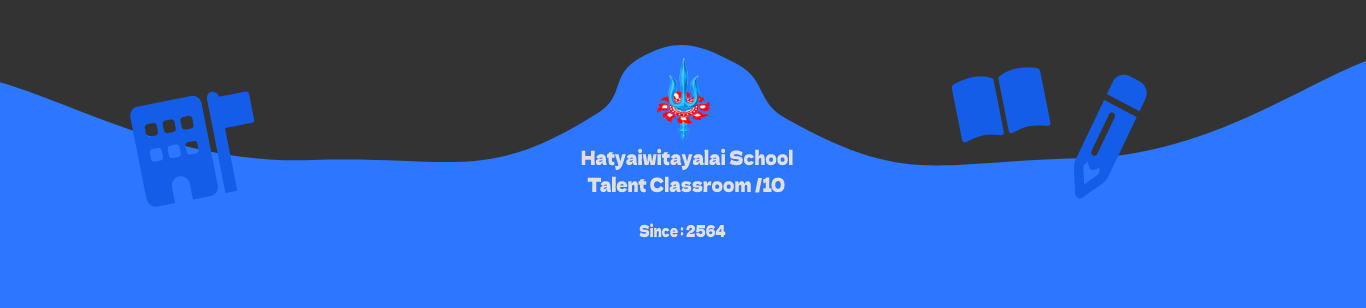
<style>
.page{position:relative;width:1366px;height:308px;background:#2d76ff}
.page>*{position:absolute;margin:0}
.t1{font:19.6px "DelaGothicOne-Regular";color:#e0e0e0;scale:0.8 1}
.t2{font:16.4px "DelaGothicOne-Regular";color:#e0e0e0;scale:0.7 1}
</style>
<div class="page">
<p class="t1" style="left:581px;top:148px;width:212px;height:23px">Hatyaiwitayalai School</p>
<p class="t1" style="left:587px;top:176px;width:198px;height:17px">Talent Classroom /10</p>
<p class="t2" style="left:639px;top:223px;width:87px;height:15px">Since : 2564</p>
</div>
